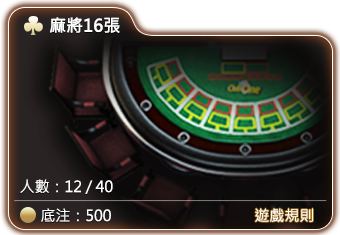
<style>
.page{position:relative;width:340px;height:235px}
.page>*{position:absolute;margin:0}
.t1{font:16.7px "MicrosoftJhengHeiRegular";color:#ffffff;font-weight:bold}
.t2{font:15px "MicrosoftJhengHeiRegular";color:#ffffff}
</style>
<div class="page">
<p class="t1" style="left:50px;top:17px;width:70px;height:16px">麻將16張</p>
<p class="t2" style="left:20px;top:179px;width:93px;height:15px">人數：12 / 40</p>
<p class="t2" style="left:41px;top:208px;width:70px;height:14px">底注：500</p>
<p class="t2" style="left:255px;top:208px;width:58px;height:14px">遊戲規則</p>
</div>
